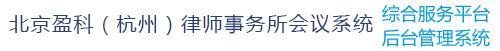
<style>
.page{position:relative;width:500px;height:51px;background:#ffffff}
.page>*{position:absolute;margin:0}
.t1{font:20px "MicrosoftYaHei";letter-spacing:0.075em;color:#293f79}
</style>
<div class="page">
<p class="t1" style="left:9px;top:14px;width:364px;height:21px">北京盈科（杭州）律师事务所会议系统</p>
</div>
